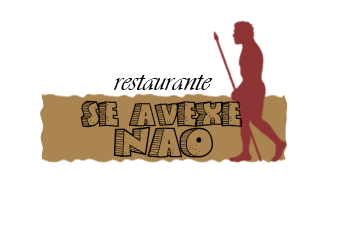
<style>
.page{position:relative;width:337px;height:229px;background:#ffffff}
.page>*{position:absolute;margin:0}
.t1{font:30px "Vivaldii";color:#000000}
.t2{font:30px "StoneyBilly";color:#000000}
.t3{font:37.9px "StoneyBilly";color:#000000}
</style>
<div class="page">
<p class="t1" style="left:114px;top:75px;width:98px;height:15px">restaurante</p>
<p class="t2" style="left:80px;top:100px;width:162px;height:28px">se avexe</p>
<p class="t3" style="left:113px;top:126px;width:101px;height:32px">nao</p>
</div>
